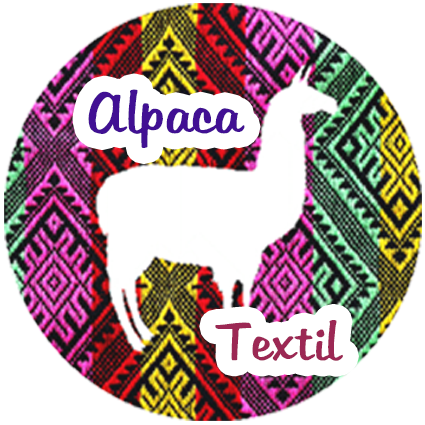
<style>
.page{position:relative;width:425px;height:425px;background:#ffffff}
.page>*{position:absolute;margin:0}
.t1{font:56px "Martina";color:#411093}
.t2{font:51.6px "Martina";color:#9c2854}
</style>
<div class="page">
<p class="t1" style="left:88px;top:89px;width:157px;height:59px">Alpaca</p>
<p class="t2" style="left:215px;top:320px;width:128px;height:41px">Textil</p>
</div>
